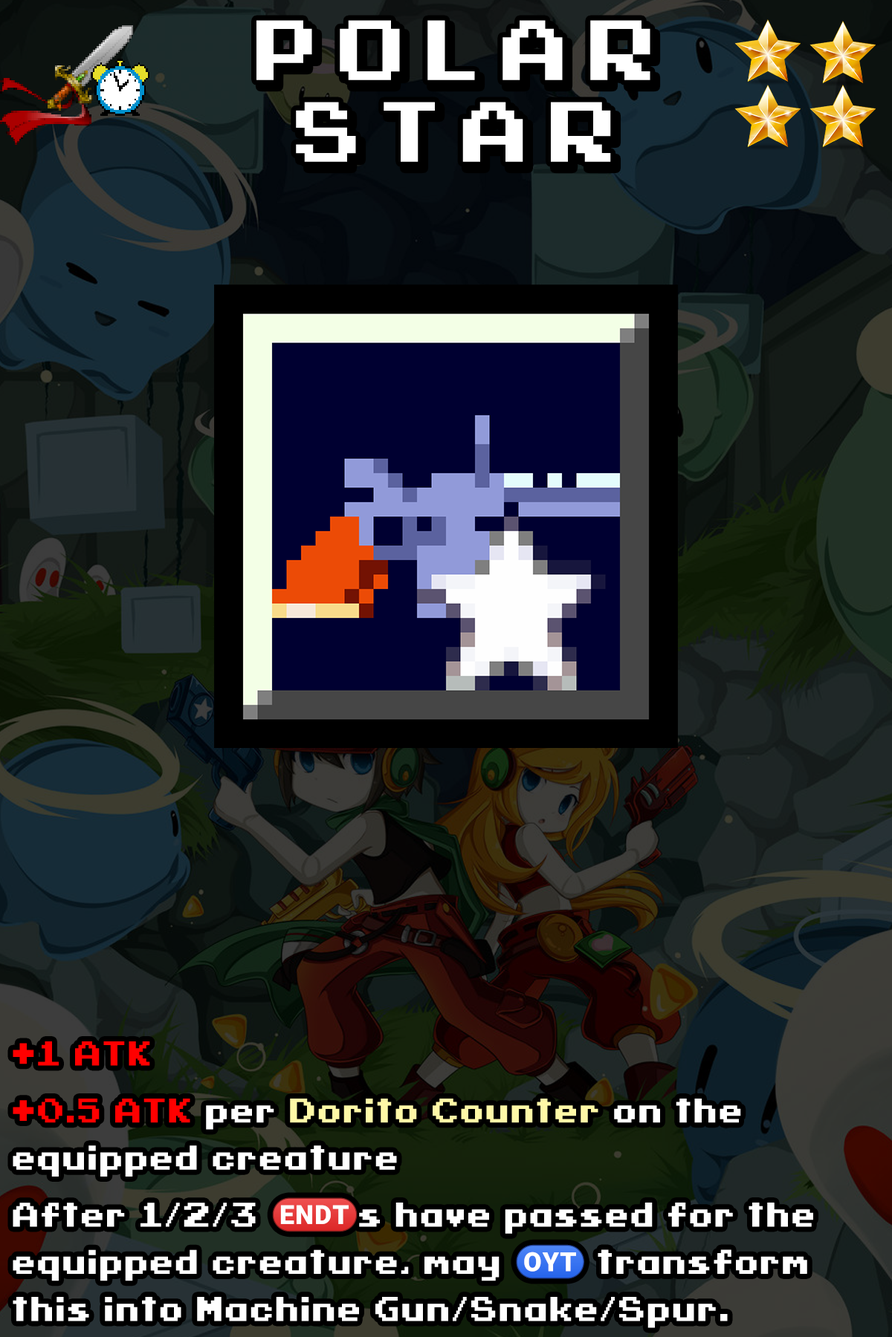
<style>
.page{position:relative;width:892px;height:1337px}
.page>*{position:absolute;margin:0}
.t1{font:233.1px/81.7px "Cave-Story";letter-spacing:0.16em;color:#ffffff}
.t2{font:93.5px/47.1px "Cave-Story";letter-spacing:0.04em;color:#ffffff}
.t3{font:93.5px/47.1px "Cave-Story";letter-spacing:0.04em;color:#ff0000}
.t4{font:93.5px/57.1px "Cave-Story";letter-spacing:0.04em;color:#ff0000}
.t5{font:93.5px/57.1px "Cave-Story";letter-spacing:0.04em;color:#ffffff}
.t6{font:93.5px/57.1px "Cave-Story";letter-spacing:0.04em;color:#fff8a7}
.t7{font:59.4px/57.1px "stoogedings-Regular";letter-spacing:0.04em;color:#ffffff}
.t8{font:59.4px/47.1px "stoogedings-Regular";letter-spacing:0.04em;color:#ffffff}
</style>
<div class="page">
<p class="t1" style="left:256px;top:20px;width:394px;height:142px;text-align:center">POLAR<br>STAR</p>
<p class="t2" style="left:13px;top:1042px;width:800px;height:286px"><span class="t3">+1 ATK<br></span><span class="t4">+0.5 ATK</span><span class="t5"> per </span><span class="t6">Dorito Counter</span><span class="t5"> on </span>the equipped creature<br><span class="t5">After 1/2/3 </span><span class="t7">(ENDT)</span><span class="t5">s have passed for the </span>equipped creature, may <span class="t8">(OYT)</span> transform this into Machine Gun/Snake/Spur.</p>
</div>
